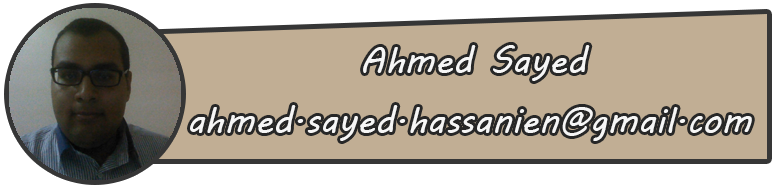
<style>
.page{position:relative;width:776px;height:190px;background:#c1ae94}
.page>*{position:absolute;margin:0}
.t1{font:36px "MVBoli";color:#f6f6f6}
</style>
<div class="page">
<p class="t1" style="left:363px;top:45px;width:227px;height:36px">Ahmed Sayed</p>
<p class="t1" style="left:190px;top:105px;width:562px;height:36px">ahmed.sayed.hassanien@gmail.com</p>
</div>
